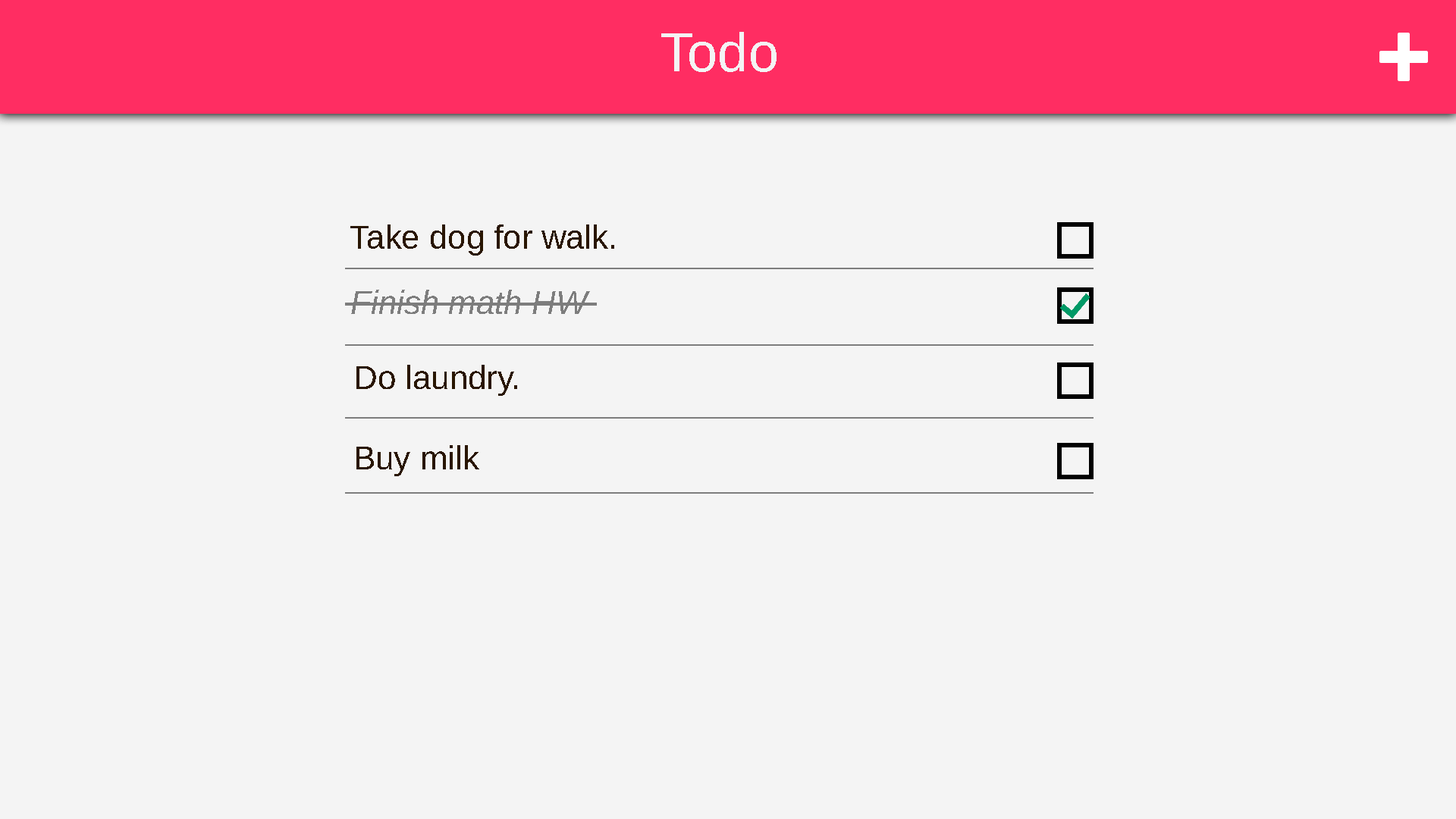
<style>
.page{position:relative;width:1456px;height:819px;background:#f4f4f4}
.page>*{position:absolute;margin:0}
.t1{font:54.6px "Arimo";color:#f4f4f4}
.t2{font:33.2px "Arimo";color:#291600}
.t3{font:33.2px "Arimo-Italic";color:#7d7d7d}
</style>
<div class="page">
<p class="t1" style="left:661px;top:32px;width:116px;height:40px">Todo</p>
<p class="t2" style="left:350px;top:224px;width:264px;height:32px">Take dog for walk.</p>
<p class="t3" style="left:351px;top:290px;width:239px;height:24px">Finish math HW</p>
<p class="t2" style="left:356px;top:365px;width:161px;height:31px">Do laundry.</p>
<p class="t2" style="left:356px;top:445px;width:123px;height:31px">Buy milk</p>
</div>
